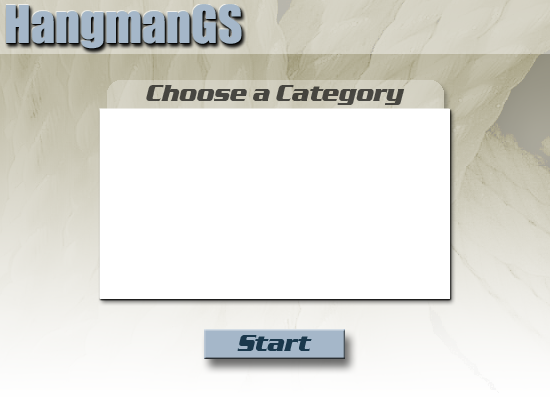
<style>
.page{position:relative;width:550px;height:400px;background:#ffffff}
.page>*{position:absolute;margin:0}
.t1{font:48px "Impact";color:#a6b8c9}
.t2{font:24px "SerpentineD-BoldItal";color:#1a384c}
</style>
<div class="page">
<p class="t1" style="left:6px;top:4px;width:236px;height:45px">HangmanGS</p>
<p class="t2" style="left:237px;top:335px;width:75px;height:16px">Start</p>
</div>
